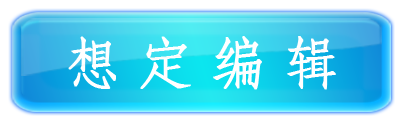
<style>
.page{position:relative;width:404px;height:123px;background:#ffffff}
.page>*{position:absolute;margin:0}
.t1{font:56px "STFangsong";color:#ffffff;font-weight:bold}
</style>
<div class="page">
<p class="t1" style="left:68px;top:36px;width:268px;height:54px">想 定 编 辑</p>
</div>
